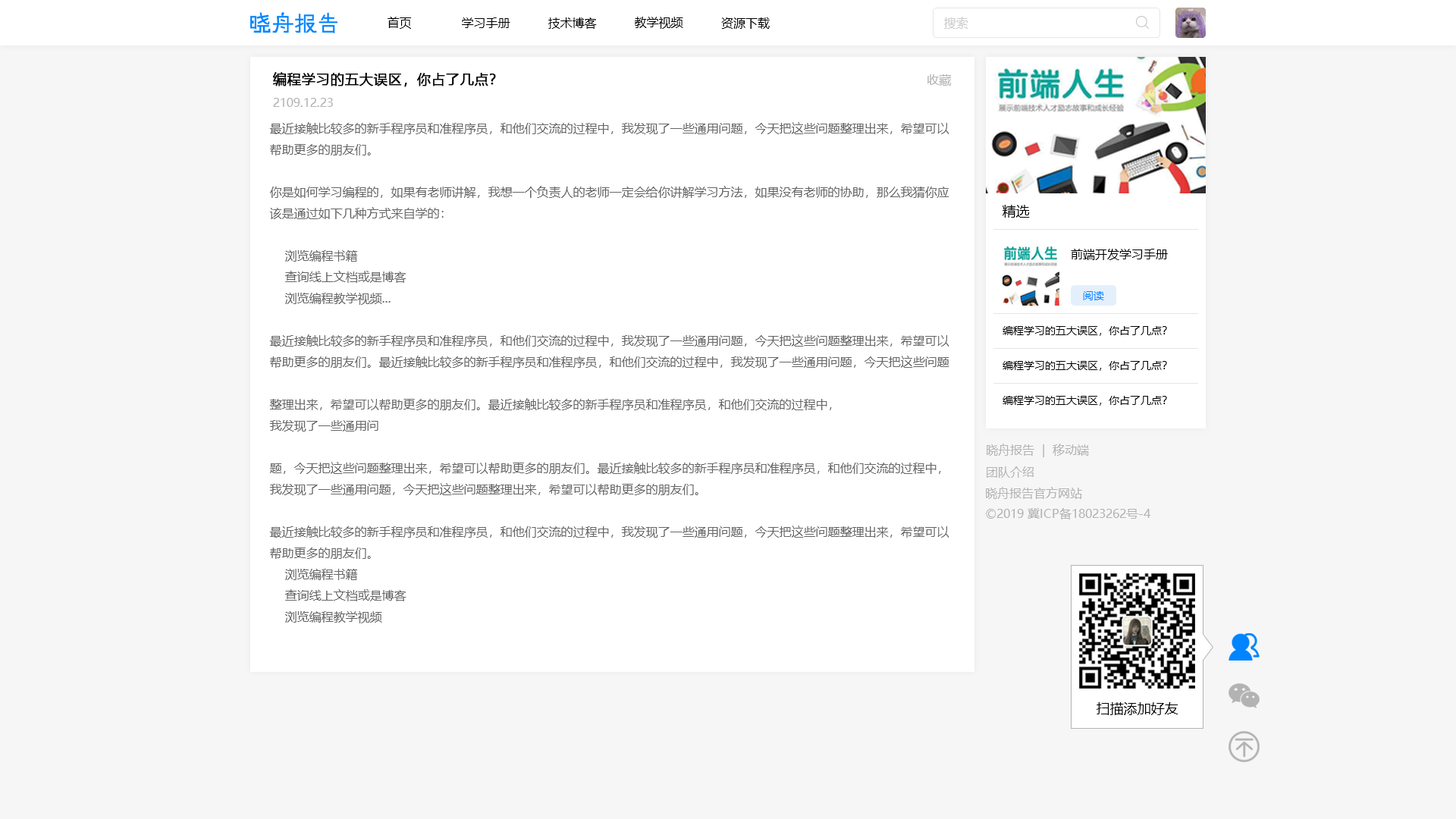
<style>
.page{position:relative;width:1456px;height:819px;background:#f6f6f6}
.page>*{position:absolute;margin:0}
.t1{font:12.1px "MicrosoftYaHei";color:#000000}
.t2{font:12.1px "MicrosoftYaHei";color:#cccccc}
.t3{font:13.6px "MicrosoftYaHei";color:#000000;font-weight:bold}
.t4{font:12.1px "MicrosoftYaHei";color:#b3b3b3}
.t5{font:12.1px "MicrosoftYaHei";color:#666666}
.t6{font:13.6px "MicrosoftYaHei";color:#000000}
.t7{font:10.6px "MicrosoftYaHei";color:#0084ff}
.t8{font:10.6px "MicrosoftYaHei";color:#000000}
</style>
<div class="page">
<p class="t1" style="left:388px;top:17px;width:24px;height:12px">首页</p>
<p class="t1" style="left:462px;top:17px;width:48px;height:11px">学习手册</p>
<p class="t1" style="left:548px;top:17px;width:49px;height:12px">技术博客</p>
<p class="t1" style="left:635px;top:17px;width:48px;height:12px">教学视频</p>
<p class="t1" style="left:721px;top:17px;width:49px;height:12px">资源下载</p>
<p class="t2" style="left:944px;top:17px;width:24px;height:12px">搜索</p>
<p class="t3" style="left:272px;top:72px;width:224px;height:15px">编程学习的五大误区，你占了几点？</p>
<p class="t4" style="left:927px;top:74px;width:25px;height:12px">收藏</p>
<p class="t4" style="left:273px;top:98px;width:60px;height:9px">2109.12.23</p>
<p class="t5" style="left:269px;top:122px;width:680px;height:501px">最近接触比较多的新手程序员和准程序员，和他们交流的过程中，我发现了一些通用问题，今天把这些问题整理出来，希望可以<br>帮助更多的朋友们。<br><br>你是如何学习编程的，如果有老师讲解，我想一个负责人的老师一定会给你讲解学习方法，如果没有老师的协助，那么我猜你应<br>该是通过如下几种方式来自学的：<br><br>    浏览编程书籍<br>    查询线上文档或是博客<br>    浏览编程教学视频...<br><br>最近接触比较多的新手程序员和准程序员，和他们交流的过程中，我发现了一些通用问题，今天把这些问题整理出来，希望可以<br>帮助更多的朋友们。最近接触比较多的新手程序员和准程序员，和他们交流的过程中，我发现了一些通用问题，今天把这些问题<br><br>整理出来，希望可以帮助更多的朋友们。最近接触比较多的新手程序员和准程序员，和他们交流的过程中，<br>我发现了一些通用问<br><br>题，今天把这些问题整理出来，希望可以帮助更多的朋友们。最近接触比较多的新手程序员和准程序员，和他们交流的过程中，<br>我发现了一些通用问题，今天把这些问题整理出来，希望可以帮助更多的朋友们。<br><br>最近接触比较多的新手程序员和准程序员，和他们交流的过程中，我发现了一些通用问题，今天把这些问题整理出来，希望可以<br>帮助更多的朋友们。<br>    浏览编程书籍<br>    查询线上文档或是博客<br>    浏览编程教学视频</p>
<p class="t6" style="left:1003px;top:205px;width:27px;height:13px">精选</p>
<p class="t1" style="left:1071px;top:249px;width:97px;height:11px">前端开发学习手册</p>
<p class="t7" style="left:1083px;top:291px;width:21px;height:9px">阅读</p>
<p class="t8" style="left:1003px;top:326px;width:164px;height:10px">编程学习的五大误区，你占了几点？</p>
<p class="t8" style="left:1003px;top:361px;width:164px;height:10px">编程学习的五大误区，你占了几点？</p>
<p class="t8" style="left:1003px;top:396px;width:164px;height:10px">编程学习的五大误区，你占了几点？</p>
<p class="t4" style="left:987px;top:444px;width:102px;height:13px">晓舟报告  |  移动端</p>
<p class="t4" style="left:987px;top:466px;width:47px;height:12px">团队介绍</p>
<p class="t4" style="left:986px;top:487px;width:96px;height:12px">晓舟报告官方网站</p>
<p class="t4" style="left:986px;top:508px;width:165px;height:11px">©2019 冀ICP备18023262号-4</p>
<p class="t6" style="left:1097px;top:702px;width:81px;height:13px">扫描添加好友</p>
</div>
